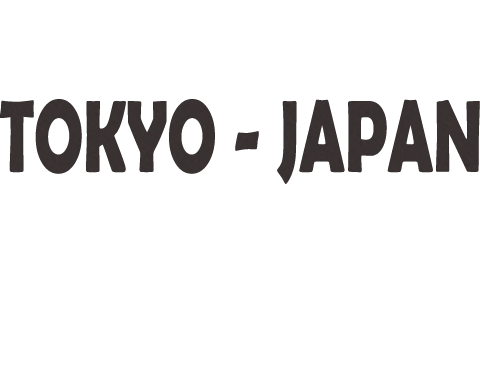
<style>
.page{position:relative;width:480px;height:392px;background:#ffffff}
.page>*{position:absolute;margin:0}
.t1{font:103.2px "BerlinSansFBDemi-Bold";color:#2b2426;scale:0.64 1}
</style>
<div class="page">
<p class="t1" style="left:0px;top:99px;width:480px;height:85px">TOKYO - JAPAN</p>
</div>
